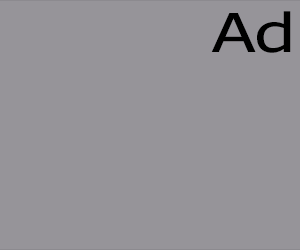
<style>
.page{position:relative;width:300px;height:250px;background:#969499}
.page>*{position:absolute;margin:0}
.t1{font:53.6px "Tahoma";color:#000000;scale:1.34 1}
</style>
<div class="page">
<p class="t1" style="left:211px;top:11px;width:80px;height:42px">Ad</p>
</div>
